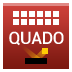
<style>
.page{position:relative;width:72px;height:72px;background:#ffffff}
.page>*{position:absolute;margin:0}
.t1{font:17px "Roboto-Medium";letter-spacing:-0.02em;color:#ffffff}
</style>
<div class="page">
<p class="t1" style="left:9px;top:31px;width:55px;height:15px">QUADO</p>
</div>
